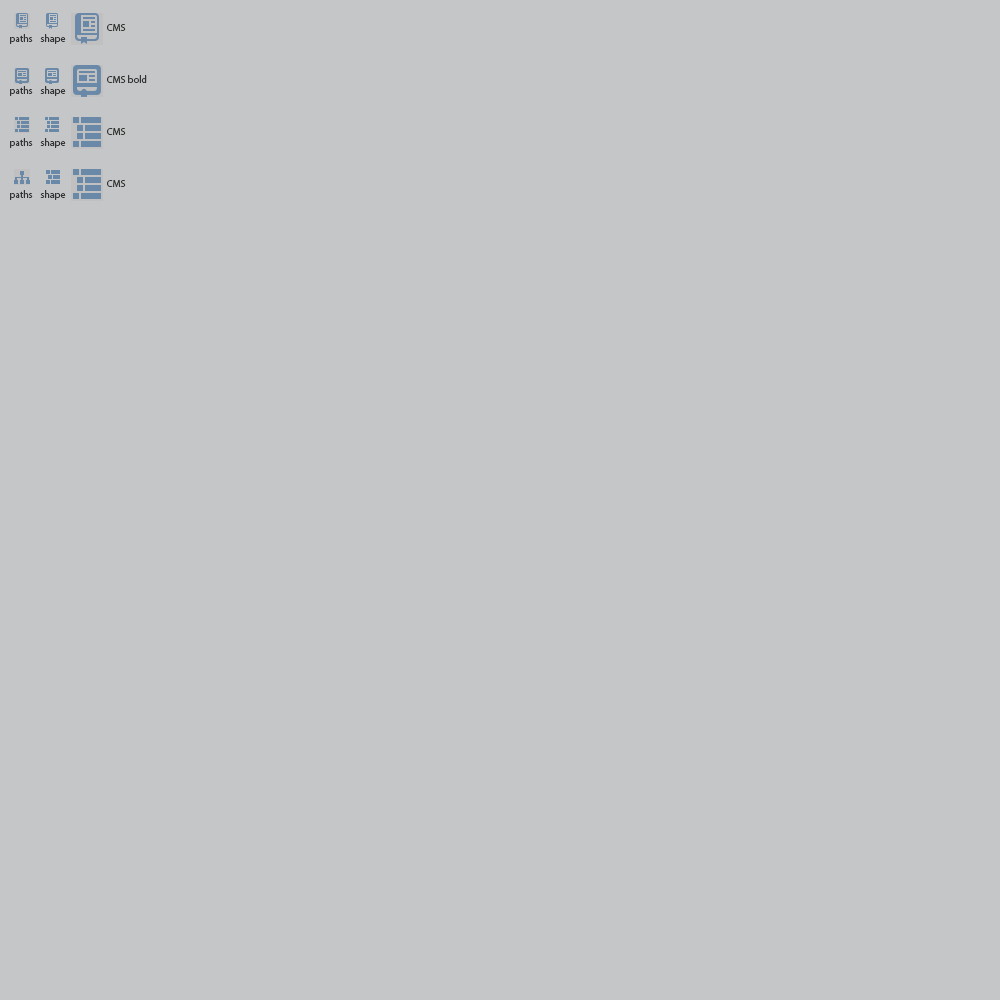
<style>
.page{position:relative;width:1000px;height:1000px;background:#c5c6c7}
.page>*{position:absolute;margin:0}
.t1{font:10px "MyriadPro-Regular";color:#333333}
</style>
<div class="page">
<p class="t1" style="left:107px;top:24px;width:19px;height:7px">CMS</p>
<p class="t1" style="left:10px;top:34px;width:23px;height:10px">paths</p>
<p class="t1" style="left:40px;top:34px;width:26px;height:10px">shape</p>
<p class="t1" style="left:107px;top:75px;width:40px;height:8px">CMS bold</p>
<p class="t1" style="left:10px;top:86px;width:23px;height:10px">paths</p>
<p class="t1" style="left:40px;top:86px;width:26px;height:10px">shape</p>
<p class="t1" style="left:107px;top:128px;width:19px;height:7px">CMS</p>
<p class="t1" style="left:10px;top:138px;width:23px;height:10px">paths</p>
<p class="t1" style="left:40px;top:138px;width:26px;height:10px">shape</p>
<p class="t1" style="left:107px;top:180px;width:19px;height:7px">CMS</p>
<p class="t1" style="left:10px;top:190px;width:23px;height:10px">paths</p>
<p class="t1" style="left:40px;top:190px;width:26px;height:10px">shape</p>
</div>
